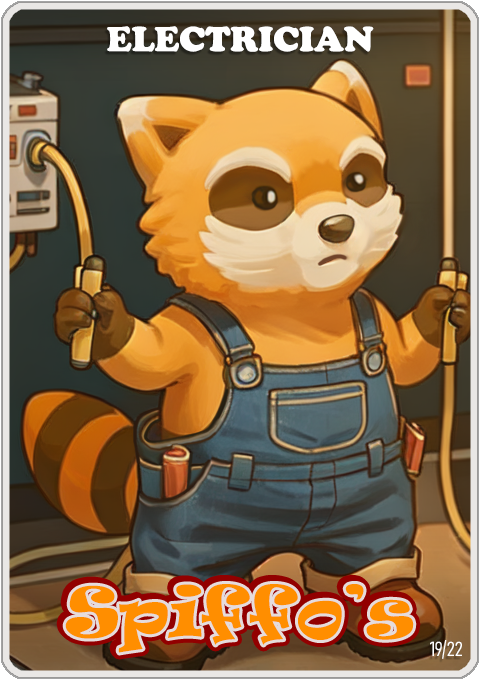
<style>
.page{position:relative;width:480px;height:680px}
.page>*{position:absolute;margin:0}
.t1{font:36px "CooperBlack";color:#ffffff}
.t2{font:65px "Ravie";color:#ff8e00}
.t3{font:20px "Bahnschrift-LightCondensed";color:#ffffff}
</style>
<div class="page">
<p class="t1" style="left:107px;top:26px;width:267px;height:26px">ELECTRICIAN</p>
<p class="t2" style="left:65px;top:584px;width:349px;height:69px">Spiffo’s</p>
<p class="t3" style="left:430px;top:640px;width:32px;height:19px">19/22</p>
</div>
